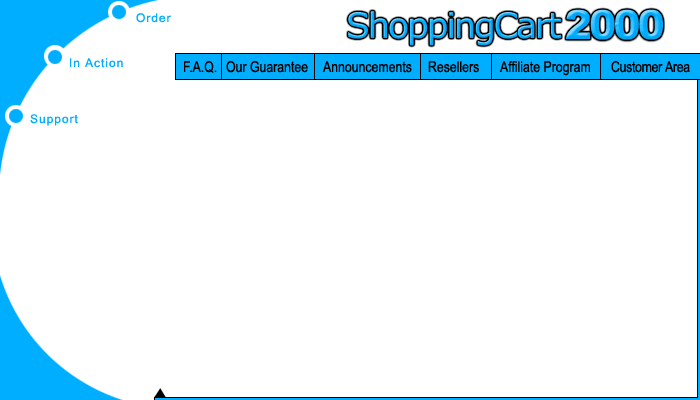
<style>
.page{position:relative;width:700px;height:400px;background:#ffffff}
.page>*{position:absolute;margin:0}
.t1{font:12px "MicrosoftSansSerif";letter-spacing:0.08em;color:#00aeff}
.t2{font:35px "Verdana";letter-spacing:-0.06em;color:#00aeff}
.t3{font:40px "Arial-Black";letter-spacing:-0.06em}
.t4{font:15px "ArialNarrow";color:#000000}
.t5{font:15px "ArialNarrow";letter-spacing:-0.02em;color:#000000}
</style>
<div class="page">
<p class="t1" style="left:136px;top:13px;width:35px;height:10px">Order</p>
<p class="t2" style="left:348px;top:11px;width:213px;height:35px">ShoppingCart</p>
<p class="t3" style="left:566px;top:9px;width:97px;height:31px">2000</p>
<p class="t1" style="left:70px;top:58px;width:53px;height:10px">In Action</p>
<p class="t4" style="left:184px;top:61px;width:33px;height:12px">F.A.Q.</p>
<p class="t4" style="left:226px;top:61px;width:82px;height:12px">Our Guarantee</p>
<p class="t4" style="left:322px;top:61px;width:90px;height:12px">Announcements</p>
<p class="t4" style="left:428px;top:61px;width:51px;height:12px">Resellers</p>
<p class="t4" style="left:499px;top:61px;width:91px;height:15px">Affiliate Program</p>
<p class="t5" style="left:611px;top:61px;width:79px;height:12px">Customer Area</p>
<p class="t1" style="left:30px;top:114px;width:48px;height:12px">Support</p>
</div>
